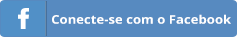
<style>
.page{position:relative;width:237px;height:37px;background:#578ac0}
.page>*{position:absolute;margin:0}
.t1{font:12px "OpenSans-Bold";color:#ffffff;scale:1.09 1}
</style>
<div class="page">
<p class="t1" style="left:52px;top:14px;width:179px;height:10px">Conecte-se com o Facebook</p>
</div>
